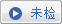
<style>
.page{position:relative;width:62px;height:24px;background:#f4f4f4}
.page>*{position:absolute;margin:0}
.t1{font:12px "SimSun";letter-spacing:0.075em;color:#3967a3}
</style>
<div class="page">
<p class="t1" style="left:31px;top:7px;width:24px;height:12px">未检</p>
</div>
